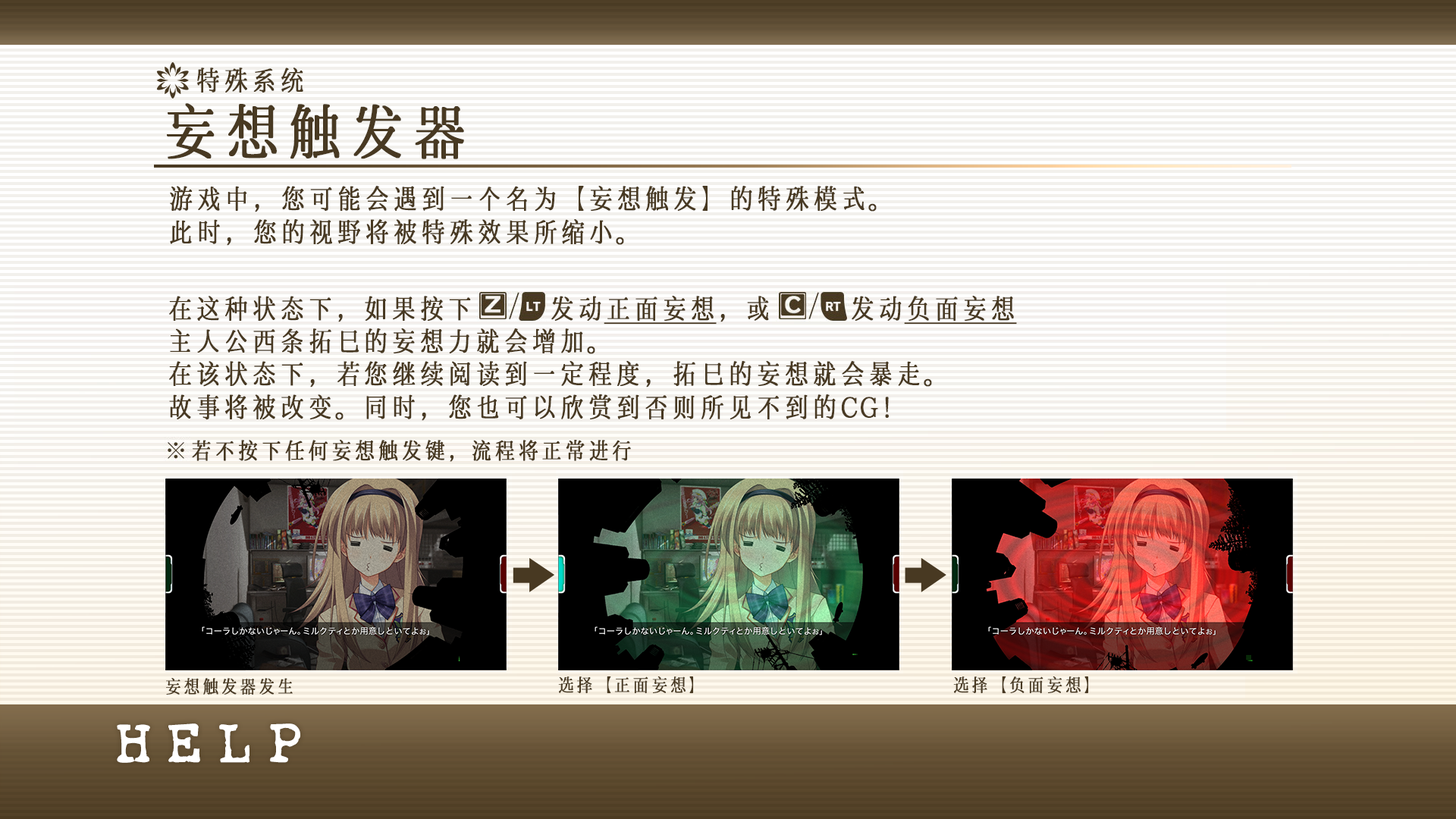
<style>
.page{position:relative;width:1456px;height:819px}
.page>*{position:absolute;margin:0}
.t1{font:27.3px "LXGWHeartSerif";color:#483922;font-weight:bold}
.t2{font:60.7px "LXGWHeartSerif";color:#483922;font-weight:bold}
.t3{font:27.3px "LXGWHeartSerif";color:#483922;font-weight:bold;text-decoration:underline}
.t4{font:22.7px "LXGWHeartSerif";color:#483922;font-weight:bold}
.t5{font:18.2px "LXGWHeartSerif";color:#483922;font-weight:bold}
</style>
<div class="page">
<p class="t1" style="left:197px;top:67px;width:106px;height:26px">特殊系统</p>
<p class="t2" style="left:167px;top:103px;width:297px;height:56px">妄想触发器</p>
<p class="t1" style="left:170px;top:186px;width:707px;height:60px">游戏中，您可能会遇到一个名为【妄想触发】的特殊模式。<br>此时，您的视野将被特殊效果所缩小。</p>
<p class="t1" style="left:169px;top:296px;width:848px;height:125px">在这种状态下，如果按下   发动<span class="t3">正面妄想</span>，或   发动<span class="t3">负面妄想<br></span>主人公西条拓巳的妄想力就会增加。<br>在该状态下，若您继续阅读到一定程度，拓巳的妄想就会暴走。<br>故事将被改变。同时，您也可以欣赏到否则所见不到的CG！</p>
<p class="t4" style="left:192px;top:440px;width:439px;height:22px">若不按下任何妄想触发键，流程将正常进行</p>
<p class="t5" style="left:166px;top:678px;width:127px;height:17px">妄想触发器发生</p>
<p class="t5" style="left:558px;top:676px;width:136px;height:18px">选择【正面妄想】</p>
<p class="t5" style="left:953px;top:676px;width:136px;height:18px">选择【负面妄想】</p>
</div>
